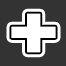
<style>
.page{position:relative;width:66px;height:66px;background:#333333}
.page>*{position:absolute;margin:0}
.t1{font:66px "WanpakuRuika-08";letter-spacing:0.05em;color:#ffffff;font-weight:bold;scale:1.1 1}
</style>
<div class="page">
<p class="t1" style="left:11px;top:13px;width:45px;height:40px">+</p>
</div>
